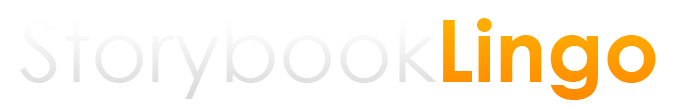
<style>
.page{position:relative;width:676px;height:108px;background:#ffffff}
.page>*{position:absolute;margin:0}
.t1{font:86.5px "CenturyGothic";color:#eeeeee}
.t2{font:86.5px "CenturyGothic-Bold";color:#ff9b00}
</style>
<div class="page">
<p class="t1" style="left:20px;top:19px;width:417px;height:80px">Storybook</p>
<p class="t2" style="left:443px;top:18px;width:213px;height:82px">Lingo</p>
</div>
